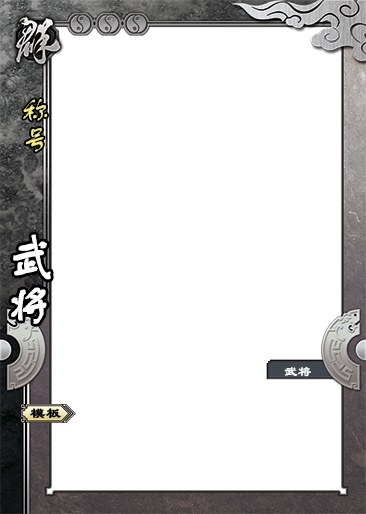
<style>
.page{position:relative;width:366px;height:514px;background:#ffffff}
.page>*{position:absolute;margin:0}
.t1{font:29.2px "FZSTK--GBK1-0";color:#f6f17d}
.t2{font:50px "FZSTK--GBK1-0";color:#ffffff;font-weight:bold}
.t3{font:13.8px "LiSu";color:#ffffff}
.t4{font:15px "LiSu";color:#000000;font-weight:bold}
</style>
<div class="page">
<p class="t1" style="left:23px;top:99px;width:25px;height:53px">称号</p>
<p class="t2" style="left:11px;top:234px;width:40px;height:90px">武将</p>
<p class="t3" style="left:284px;top:366px;width:27px;height:11px">武将</p>
<p class="t4" style="left:30px;top:408px;width:31px;height:11px">模板</p>
</div>
